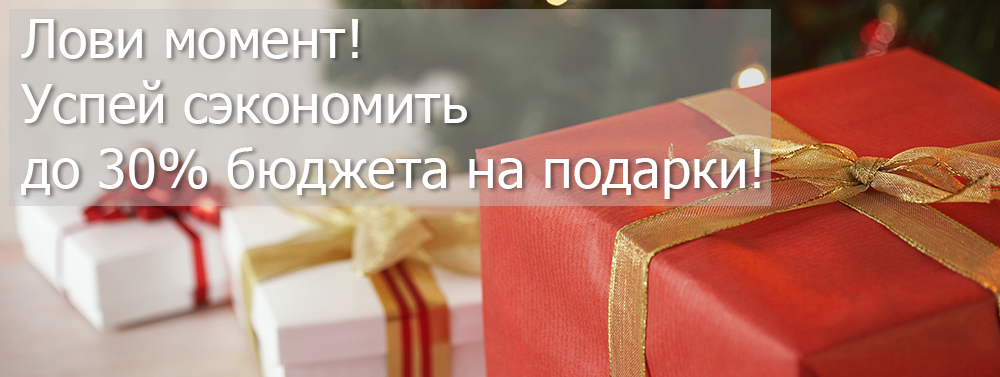
<style>
.page{position:relative;width:1000px;height:377px}
.page>*{position:absolute;margin:0}
.t1{font:54.2px "Tahoma";color:#ffffff}
</style>
<div class="page">
<p class="t1" style="left:21px;top:19px;width:739px;height:180px">Лови момент!<br>Успей сэкономить <br>до 30% бюджета на подарки!</p>
</div>
